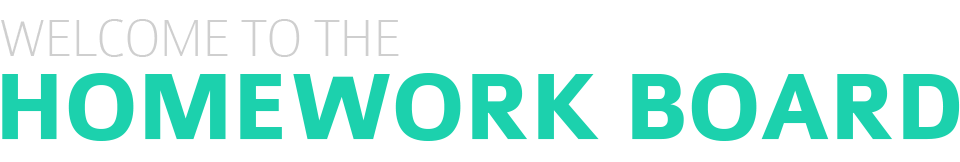
<style>
.page{position:relative;width:960px;height:162px;background:#ffffff}
.page>*{position:absolute;margin:0}
.t1{font:55.6px "Colaborate-Thin";letter-spacing:-0.025em;color:#cfcfcf}
.t2{font:101.3px "Colaborate-Bold";letter-spacing:-0.025em;color:#1cd1ad}
</style>
<div class="page">
<p class="t1" style="left:1px;top:19px;width:398px;height:38px">WELCOME TO THE</p>
<p class="t2" style="left:2px;top:73px;width:958px;height:68px">HOMEWORK BOARD</p>
</div>
